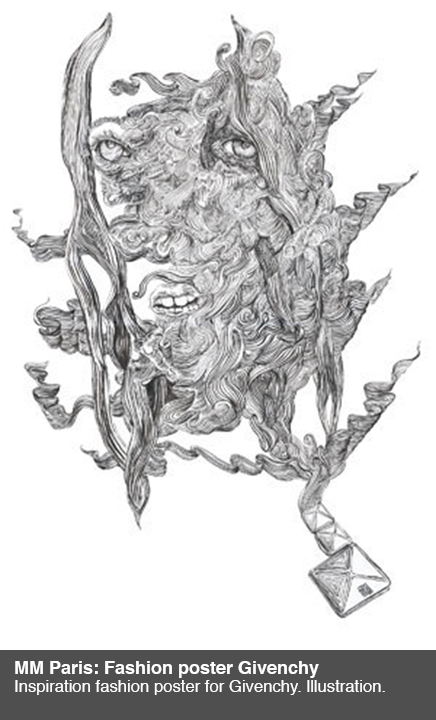
<style>
.page{position:relative;width:436px;height:720px;background:#ffffff}
.page>*{position:absolute;margin:0}
.t1{font:16.7px/18px "Helvetica";color:#ffffff}
.t2{font:18px/18px "Helvetica-Bold";color:#ffffff}
</style>
<div class="page">
<p class="t1" style="left:15px;top:661px;width:370px;height:34px"><span class="t2">MM Paris: Fashion poster Givenchy<br></span>Inspiration fashion poster for Givenchy. lllustration.</p>
</div>
